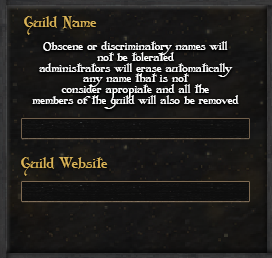
<style>
.page{position:relative;width:272px;height:258px}
.page>*{position:absolute;margin:0}
.t1{font:14.9px "Folkard";color:#d9b357}
.t2{font:11.4px/10.7px "Folkard";color:#ffffff}
</style>
<div class="page">
<p class="t1" style="left:24px;top:16px;width:73px;height:19px">Guild Name</p>
<p class="t2" style="left:32px;top:41px;width:207px;height:68px;text-align:center">Obscene or discriminatory names will<br>not be tolerated<br>administrators will erase automatically<br>any name that is not<br>consider apropiate and all the<br>members of the guild will also be removed</p>
<p class="t1" style="left:21px;top:157px;width:87px;height:19px">Guild Website</p>
</div>
